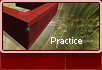
<style>
.page{position:relative;width:102px;height:70px}
.page>*{position:absolute;margin:0}
.t1{font:9px "Tahoma";color:#ffffff}
</style>
<div class="page">
<p class="t1" style="left:51px;top:37px;width:31px;height:7px">Practice</p>
</div>
